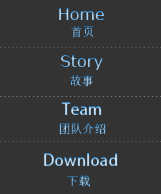
<style>
.page{position:relative;width:161px;height:194px;background:#333333}
.page>*{position:absolute;margin:0}
.t1{font:16px "Verdana"}
.t2{font:12px "SimSun";color:#7cb6e3}
.t3{font:12px "SimSun"}
.t4{font:16px "AdobeHeitiStd-Regular";color:#bfdcf1}
.t5{font:16px "AdobeHeitiStd-Regular"}
</style>
<div class="page">
<p class="t1" style="left:59px;top:8px;width:45px;height:12px">Home</p>
<p class="t2" style="left:71px;top:26px;width:23px;height:12px">首页</p>
<p class="t1" style="left:60px;top:55px;width:43px;height:15px">Story</p>
<p class="t3" style="left:70px;top:75px;width:23px;height:12px">故事</p>
<p class="t4" style="left:61px;top:102px;width:41px;height:13px">Team</p>
<p class="t3" style="left:59px;top:123px;width:47px;height:12px">团队介绍</p>
<p class="t5" style="left:44px;top:152px;width:74px;height:14px">Download</p>
<p class="t3" style="left:67px;top:175px;width:23px;height:12px">下载</p>
</div>
